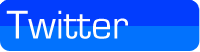
<style>
.page{position:relative;width:200px;height:52px;background:#023dfd}
.page>*{position:absolute;margin:0}
.t1{font:41.7px "EurostileRegular";color:#fffefe}
</style>
<div class="page">
<p class="t1" style="left:6px;top:10px;width:122px;height:29px">Twitter</p>
</div>
